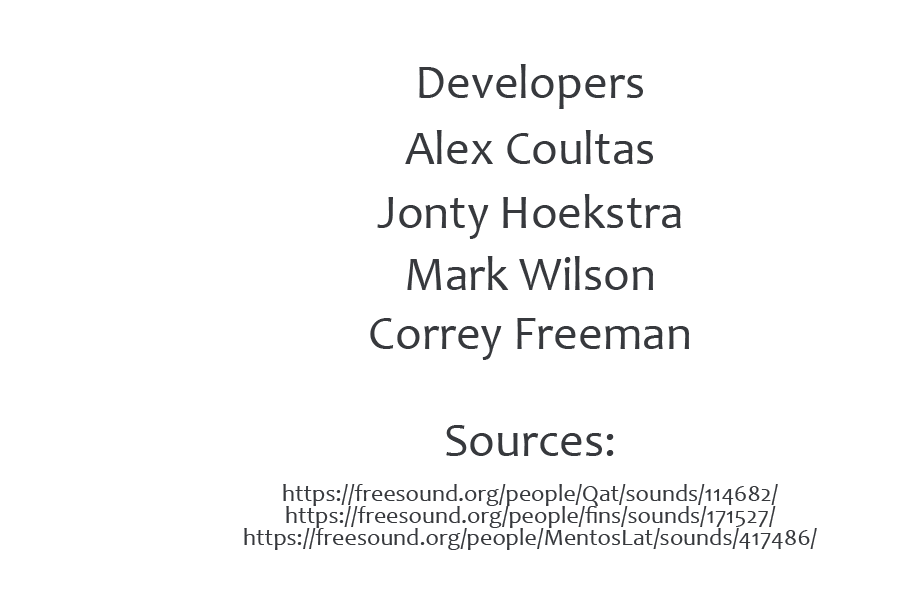
<style>
.page{position:relative;width:900px;height:600px;background:#ffffff}
.page>*{position:absolute;margin:0}
.t1{font:48px "Candara";color:#37393d}
.t2{font:24px "Candara";color:#37393d}
</style>
<div class="page">
<p class="t1" style="left:419px;top:64px;width:224px;height:45px">Developers</p>
<p class="t1" style="left:405px;top:130px;width:248px;height:34px">Alex Coultas</p>
<p class="t1" style="left:377px;top:194px;width:304px;height:45px">Jonty Hoekstra</p>
<p class="t1" style="left:407px;top:256px;width:246px;height:34px">Mark Wilson</p>
<p class="t1" style="left:370px;top:318px;width:319px;height:42px">Correy Freeman</p>
<p class="t1" style="left:446px;top:425px;width:168px;height:31px">Sources:</p>
<p class="t2" style="left:283px;top:484px;width:495px;height:22px">https://freesound.org/people/Qat/sounds/114682/</p>
<p class="t2" style="left:286px;top:506px;width:490px;height:22px">https://freesound.org/people/fins/sounds/171527/</p>
<p class="t2" style="left:244px;top:528px;width:573px;height:22px">https://freesound.org/people/MentosLat/sounds/417486/</p>
</div>
